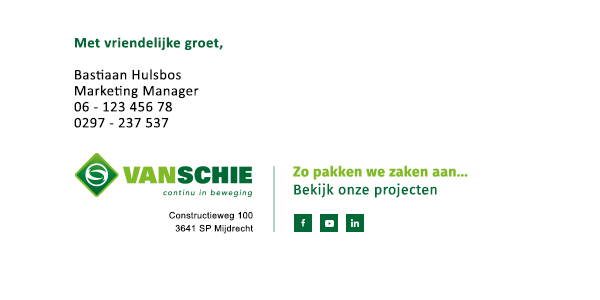
<style>
.page{position:relative;width:600px;height:300px;background:#ffffff}
.page>*{position:absolute;margin:0}
.t1{font:14.7px/16px "Calibri";letter-spacing:0.03em;color:#000000}
.t2{font:14.7px/16px "Calibri-Bold";letter-spacing:0.03em;color:#006935}
.t3{font:9px/13px "ArialMT";letter-spacing:0.03em;color:#000000}
</style>
<div class="page">
<p class="t1" style="left:74px;top:37px;width:149px;height:91px"><span class="t2">Met vriendelijke groet,<br></span><br>Bastiaan Hulsbos<br>Marketing Manager<br>06 - 123 456 78<br>0297 - 237 537</p>
<p class="t3" style="left:169px;top:211px;width:84px;height:23px;text-align:right">Constructieweg 100<br>3641 SP Mijdrecht</p>
</div>
